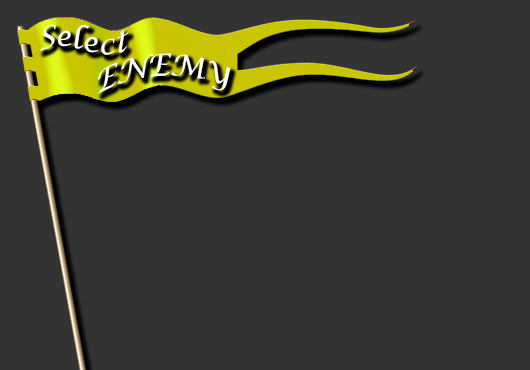
<style>
.page{position:relative;width:530px;height:370px;background:#333333}
.page>*{position:absolute;margin:0}
.t1{font:30px "LucidaCalligraphy-Italic";color:#ffffff}
</style>
<div class="page">
<p class="t1" style="left:40px;top:24px;width:89px;height:31px;rotate:-4deg">Select</p>
<p class="t1" style="left:97px;top:53px;width:134px;height:41px;rotate:-2deg">ENEMY</p>
</div>
